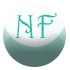
<style>
.page{position:relative;width:70px;height:70px;background:#ffffff}
.page>*{position:absolute;margin:0}
.t1{font:33.3px "Harrington";color:#2bbbad}
</style>
<div class="page">
<p class="t1" style="left:15px;top:13px;width:42px;height:25px">NF</p>
</div>
